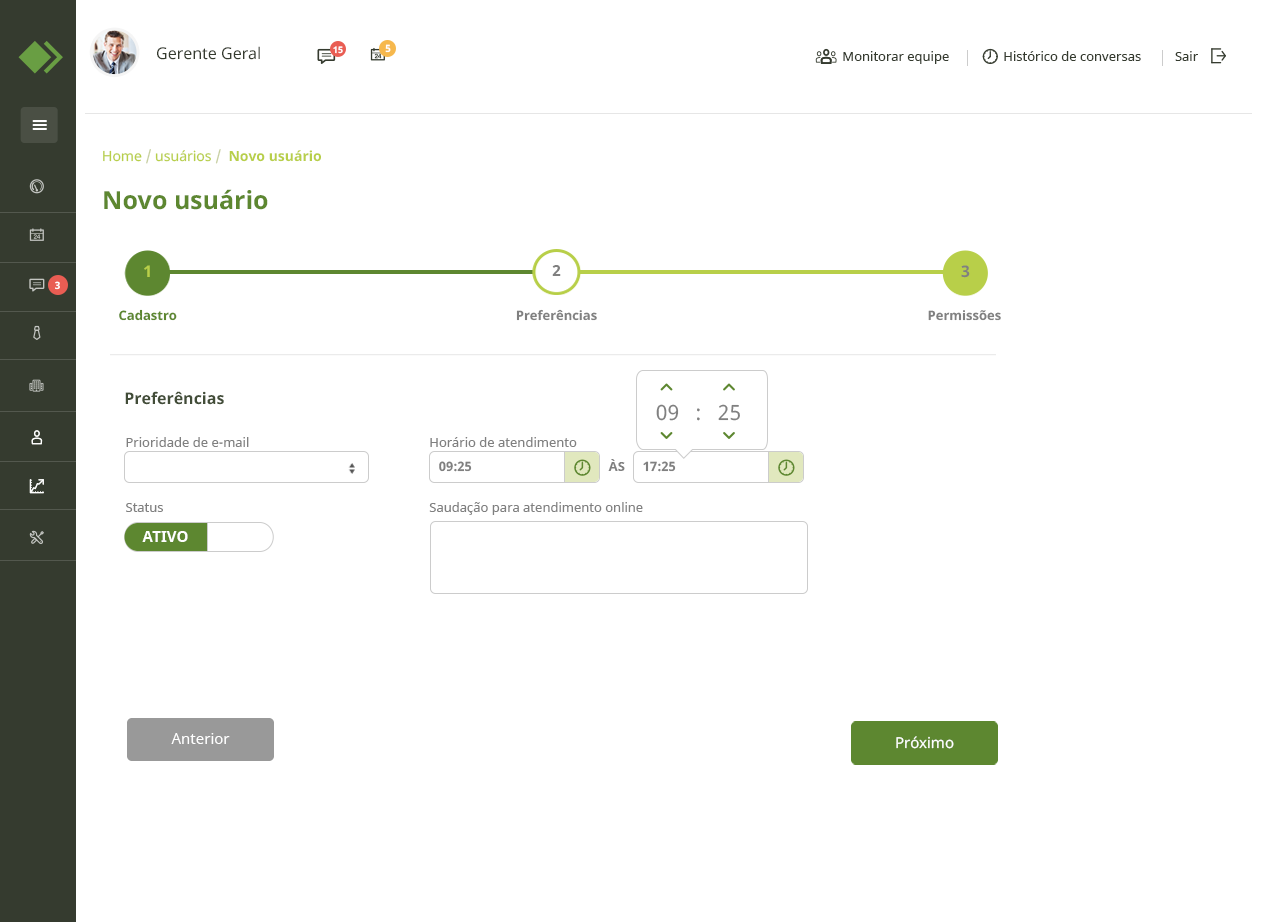
<style>
.page{position:relative;width:1280px;height:922px;background:#ffffff}
.page>*{position:absolute;margin:0}
.t1{font:16px "NotoSans";color:#353b2f}
.t2{font:9px "NotoSans-Bold";color:#ffffff}
.t3{font:10px "NotoSans-Bold";color:#ffffff}
.t4{font:13px "NotoSans";color:#353b2f}
.t5{font:14px "NotoSans-Bold";color:#b8cf49}
.t6{font:14px "NotoSans";color:#b8cf49}
.t7{font:14px "NotoSans";color:#c7cfa1}
.t8{font:25px "NotoSans-Bold";color:#5d8730}
.t9{font:16.1px "NotoSans-Bold";color:#b8cf49}
.t10{font:15.3px "NotoSans-Bold";color:#808080;scale:1.04 1}
.t11{font:16.1px "NotoSans-Bold";color:#808080}
.t12{font:13.1px "NotoSans-Bold";color:#5d8730}
.t13{font:13.1px "NotoSans-Bold";color:#808080}
.t14{font:16px "NotoSans-Bold";color:#424d38}
.t15{font:21px "NotoSans";color:#808080}
.t16{font:13px/65px "NotoSans";color:#808080}
.t17{font:13px "NotoSans-Bold";color:#808080}
.t18{font:15px "NotoSans-Bold";color:#ffffff}
.t19{font:15px "NotoSans";color:#ffffff}
</style>
<div class="page">
<p class="t1" style="left:157px;top:46px;width:103px;height:14px">Gerente Geral</p>
<p class="t2" style="left:333px;top:46px;width:10px;height:8px">15</p>
<p class="t3" style="left:385px;top:44px;width:6px;height:9px">5</p>
<p class="t4" style="left:843px;top:51px;width:355px;height:13px">Monitorar equipe                Histórico de conversas          Sair</p>
<p class="t5" style="left:103px;top:149px;width:218px;height:15px"><span class="t6">Home </span><span class="t7">/</span><span class="t6"> usuários </span><span class="t7">/  </span>Novo usuário</p>
<p class="t8" style="left:104px;top:189px;width:164px;height:21px">Novo usuário</p>
<p class="t9" style="left:144px;top:265px;width:6px;height:12px">1</p>
<p class="t10" style="left:552px;top:265px;width:9px;height:11px">2</p>
<p class="t11" style="left:961px;top:265px;width:9px;height:13px">3</p>
<p class="t3" style="left:55px;top:281px;width:5px;height:9px">3</p>
<p class="t12" style="left:119px;top:309px;width:58px;height:12px">Cadastro</p>
<p class="t13" style="left:516px;top:309px;width:81px;height:12px">Preferências</p>
<p class="t13" style="left:928px;top:310px;width:73px;height:11px">Permissões</p>
<p class="t14" style="left:125px;top:391px;width:99px;height:14px">Preferências</p>
<p class="t15" style="left:656px;top:404px;width:84px;height:17px">09   :   25</p>
<p class="t16" style="left:126px;top:437px;width:123px;height:75px">Prioridade de e-mail<br>Status</p>
<p class="t16" style="left:429px;top:437px;width:214px;height:78px">Horário de atendimento<br>Saudação para atendimento online<br>Cargo</p>
<p class="t17" style="left:439px;top:461px;width:33px;height:11px">09:25</p>
<p class="t17" style="left:608px;top:459px;width:17px;height:12px">ÀS</p>
<p class="t17" style="left:643px;top:461px;width:33px;height:11px">17:25</p>
<p class="t18" style="left:142px;top:531px;width:46px;height:11px">ATIVO</p>
<p class="t19" style="left:171px;top:733px;width:59px;height:11px">Anterior</p>
<p class="t19" style="left:896px;top:736px;width:58px;height:13px">Próximo</p>
</div>
